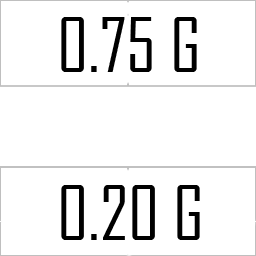
<style>
.page{position:relative;width:256px;height:256px;background:#ffffff}
.page>*{position:absolute;margin:0}
.t1{font:72px "AgencyFB-Reg";color:#000000}
</style>
<div class="page">
<p class="t1" style="left:61px;top:17px;width:136px;height:55px">0.75 G</p>
<p class="t1" style="left:61px;top:185px;width:139px;height:55px">0.20 G</p>
</div>
